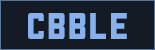
<style>
.page{position:relative;width:155px;height:50px;background:#151b24}
.page>*{position:absolute;margin:0}
.t1{font:36px "Cornerstone";color:#87b1ec}
</style>
<div class="page">
<p class="t1" style="left:28px;top:13px;width:99px;height:26px">cbble</p>
</div>
